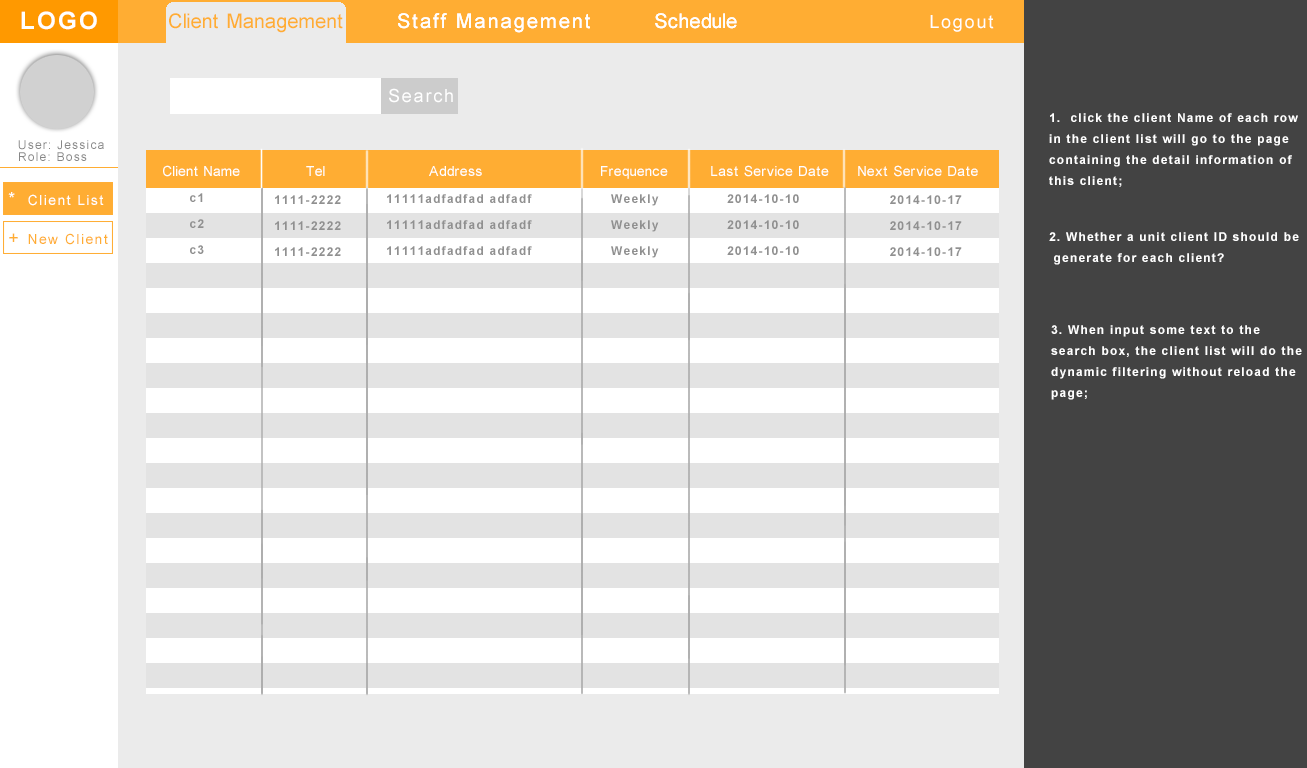
<style>
.page{position:relative;width:1307px;height:768px;background:#ffffff}
.page>*{position:absolute;margin:0}
.t1{font:24px "Arial-BoldMT";letter-spacing:0.1em;color:#ffffff}
.t2{font:20px "ArialMT";letter-spacing:0.1em;color:#ffad33}
.t3{font:20px "ArialMT";letter-spacing:0.1em;color:#ffffff}
.t4{font:18px "ArialMT";letter-spacing:0.1em;color:#ffffff}
.t5{font:12px "Arial-BoldMT";letter-spacing:0.1em;color:#ffffff}
.t6{font:12px "ArialMT";letter-spacing:0.1em;color:#878787}
.t7{font:14px "ArialMT";letter-spacing:0.1em;color:#ffffff}
.t8{font:12px "Arial-BoldMT";letter-spacing:0.1em;color:#909090}
.t9{font:14px "ArialMT";letter-spacing:0.1em;color:#ffad33}
.t10{font:18px "ArialMT";letter-spacing:0.1em;color:#ffad33}
</style>
<div class="page">
<p class="t1" style="left:21px;top:11px;width:76px;height:19px">LOGO</p>
<p class="t2" style="left:169px;top:13px;width:174px;height:20px">Client Management</p>
<p class="t2" style="left:169px;top:13px;width:174px;height:20px">Client Management</p>
<p class="t3" style="left:398px;top:13px;width:192px;height:20px">Staff Management</p>
<p class="t3" style="left:398px;top:13px;width:192px;height:20px">Staff Management</p>
<p class="t3" style="left:655px;top:13px;width:82px;height:16px">Schedule</p>
<p class="t3" style="left:655px;top:13px;width:82px;height:16px">Schedule</p>
<p class="t4" style="left:930px;top:15px;width:64px;height:17px">Logout</p>
<p class="t4" style="left:389px;top:88px;width:64px;height:15px">Search</p>
<p class="t5" style="left:1049px;top:113px;width:249px;height:74px">1.  click the client Name of each row<br>in the client list will go to the page<br>containing the detail information of <br>this client;</p>
<p class="t6" style="left:18px;top:140px;width:86px;height:10px">User: Jessica</p>
<p class="t6" style="left:19px;top:152px;width:68px;height:9px">Role: Boss</p>
<p class="t7" style="left:163px;top:165px;width:77px;height:12px">Client Name</p>
<p class="t7" style="left:306px;top:166px;width:19px;height:10px">Tel</p>
<p class="t7" style="left:429px;top:166px;width:53px;height:10px">Address</p>
<p class="t7" style="left:601px;top:166px;width:67px;height:13px">Frequence</p>
<p class="t7" style="left:711px;top:165px;width:118px;height:12px">Last Service Date</p>
<p class="t7" style="left:858px;top:165px;width:120px;height:12px">Next Service Date</p>
<p class="t7" style="left:8px;top:192px;width:96px;height:14px"><span class="t4">*</span>  Client List</p>
<p class="t8" style="left:190px;top:193px;width:13px;height:9px">c1</p>
<p class="t8" style="left:275px;top:195px;width:66px;height:9px">1111-2222</p>
<p class="t8" style="left:387px;top:194px;width:145px;height:9px">11111adfadfad adfadf</p>
<p class="t8" style="left:611px;top:194px;width:48px;height:12px">Weekly</p>
<p class="t8" style="left:727px;top:194px;width:72px;height:9px">2014-10-10</p>
<p class="t8" style="left:890px;top:195px;width:72px;height:9px">2014-10-17</p>
<p class="t8" style="left:190px;top:219px;width:14px;height:9px">c2</p>
<p class="t8" style="left:275px;top:221px;width:66px;height:9px">1111-2222</p>
<p class="t8" style="left:387px;top:220px;width:145px;height:9px">11111adfadfad adfadf</p>
<p class="t8" style="left:611px;top:220px;width:48px;height:12px">Weekly</p>
<p class="t8" style="left:727px;top:220px;width:72px;height:9px">2014-10-10</p>
<p class="t8" style="left:890px;top:221px;width:72px;height:9px">2014-10-17</p>
<p class="t9" style="left:9px;top:233px;width:99px;height:12px"><span class="t10">+ </span>New Client</p>
<p class="t5" style="left:1049px;top:232px;width:250px;height:33px">2. Whether a unit client ID should be<br> generate for each client?</p>
<p class="t8" style="left:190px;top:245px;width:14px;height:9px">c3</p>
<p class="t8" style="left:387px;top:246px;width:145px;height:9px">11111adfadfad adfadf</p>
<p class="t8" style="left:611px;top:246px;width:48px;height:12px">Weekly</p>
<p class="t8" style="left:727px;top:246px;width:72px;height:9px">2014-10-10</p>
<p class="t8" style="left:275px;top:247px;width:66px;height:9px">1111-2222</p>
<p class="t8" style="left:890px;top:247px;width:72px;height:9px">2014-10-17</p>
<p class="t5" style="left:1051px;top:325px;width:251px;height:75px">3. When input some text to the <br>search box, the client list will do the<br>dynamic filtering without reload the<br>page;</p>
</div>
